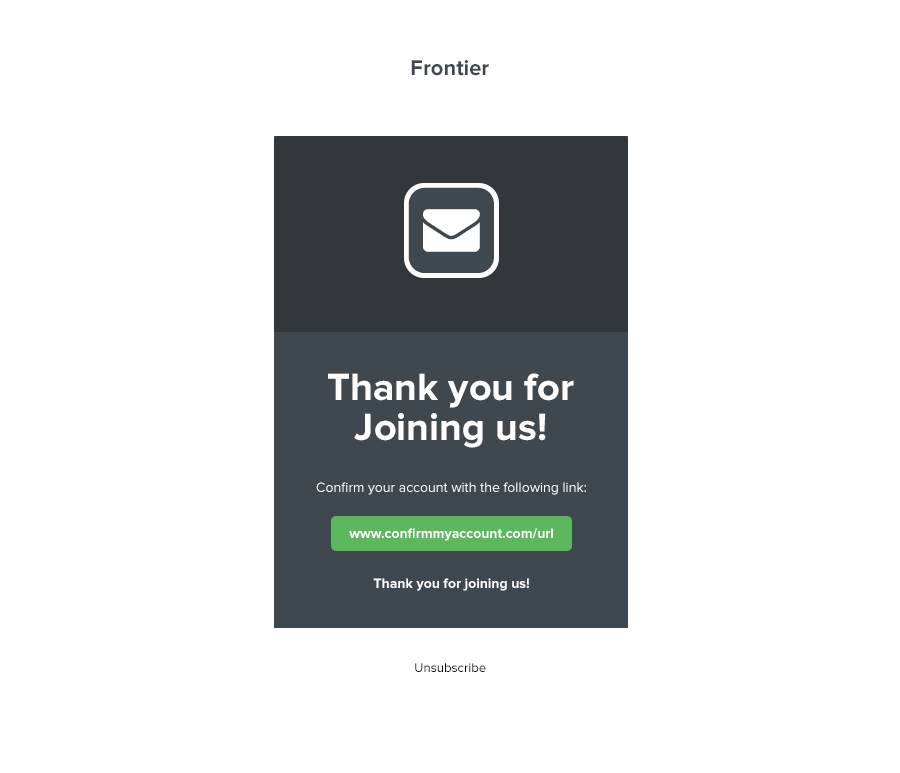
<style>
.page{position:relative;width:900px;height:773px;background:#ffffff}
.page>*{position:absolute;margin:0}
.t1{font:22px "ProximaNova-Bold";color:#40484f}
.t2{font:39.5px/34.4px "ProximaNova-Bold";color:#fffefe}
.t3{font:14px "ProximaNova-Regular";color:#ffffff}
.t4{font:14px "ProximaNova-Bold";color:#ffffff}
.t5{font:13.1px "ProximaNova-Regular";color:#000000}
</style>
<div class="page">
<p class="t1" style="left:411px;top:60px;width:78px;height:16px">Frontier</p>
<p class="t2" style="left:328px;top:373px;width:246px;height:75px;text-align:center">Thank you for<br>Joining us!</p>
<p class="t3" style="left:316px;top:482px;width:270px;height:13px">Confirm your account with the following link:</p>
<p class="t4" style="left:349px;top:528px;width:204px;height:13px">www.confirmmyaccount.com/url</p>
<p class="t4" style="left:373px;top:578px;width:156px;height:13px">Thank you for joining us!</p>
<p class="t5" style="left:415px;top:663px;width:71px;height:9px">Unsubscribe</p>
</div>
